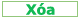
<style>
.page{position:relative;width:80px;height:18px;background:#ffffff}
.page>*{position:absolute;margin:0}
.t1{font:13.9px "Verdana-Bold";color:#11b954}
</style>
<div class="page">
<p class="t1" style="left:26px;top:3px;width:29px;height:12px">Xóa</p>
</div>
